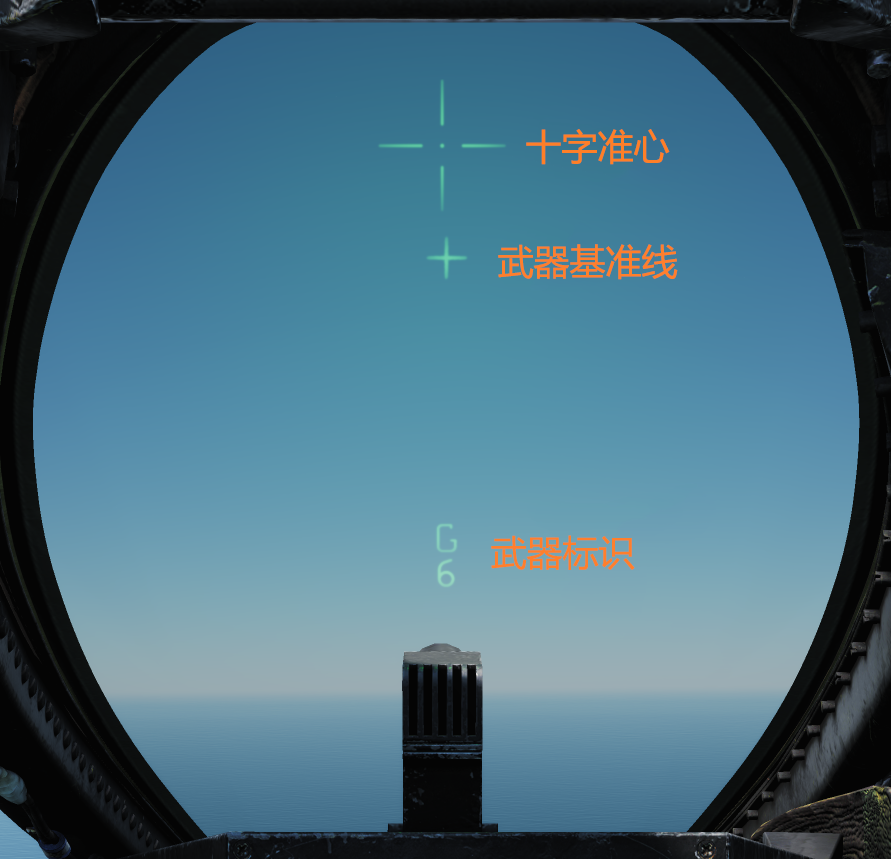
<style>
.page{position:relative;width:891px;height:859px}
.page>*{position:absolute;margin:0}
.t1{font:36px "MicrosoftYaHei";color:#ff7f27}
.t2{font:36px "MicrosoftYaHei";color:#ff7f2c}
</style>
<div class="page">
<p class="t1" style="left:526px;top:129px;width:144px;height:36px">十字准心</p>
<p class="t2" style="left:498px;top:244px;width:180px;height:36px">武器基准线</p>
<p class="t2" style="left:491px;top:535px;width:144px;height:35px">武器标识</p>
</div>
